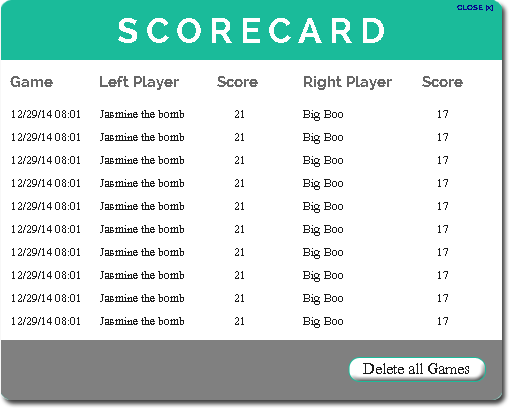
<style>
.page{position:relative;width:509px;height:408px;background:#ffffff}
.page>*{position:absolute;margin:0}
.t1{font:8px "Raleway-Bold";color:#07048e}
.t2{font:35px "Raleway-Bold";letter-spacing:0.2em;color:#ffffff}
.t3{font:15px "Raleway-Bold";color:#676767}
.t4{font:14px "ShonarBangla";color:#1a1a1a}
.t5{font:19px "ShonarBangla";color:#1a1a1a}
</style>
<div class="page">
<p class="t1" style="left:457px;top:5px;width:36px;height:6px">CLOSE [x]</p>
<p class="t2" style="left:118px;top:18px;width:266px;height:25px">SCORECARD</p>
<p class="t3" style="left:10px;top:76px;width:43px;height:11px">Game</p>
<p class="t3" style="left:100px;top:76px;width:79px;height:14px">Left Player</p>
<p class="t3" style="left:217px;top:76px;width:41px;height:11px">Score</p>
<p class="t3" style="left:304px;top:76px;width:88px;height:14px">Right Player</p>
<p class="t3" style="left:422px;top:76px;width:41px;height:11px">Score</p>
<p class="t4" style="left:12px;top:110px;width:68px;height:8px">12/29/14 08:01</p>
<p class="t4" style="left:100px;top:110px;width:84px;height:8px">Jasmine the bomb</p>
<p class="t4" style="left:235px;top:110px;width:9px;height:8px">21</p>
<p class="t4" style="left:303px;top:110px;width:40px;height:11px">Big Boo</p>
<p class="t4" style="left:438px;top:110px;width:10px;height:8px">17</p>
<p class="t4" style="left:12px;top:133px;width:68px;height:8px">12/29/14 08:01</p>
<p class="t4" style="left:100px;top:133px;width:84px;height:8px">Jasmine the bomb</p>
<p class="t4" style="left:235px;top:133px;width:9px;height:8px">21</p>
<p class="t4" style="left:303px;top:133px;width:40px;height:11px">Big Boo</p>
<p class="t4" style="left:438px;top:133px;width:10px;height:8px">17</p>
<p class="t4" style="left:12px;top:156px;width:68px;height:8px">12/29/14 08:01</p>
<p class="t4" style="left:100px;top:156px;width:84px;height:8px">Jasmine the bomb</p>
<p class="t4" style="left:235px;top:156px;width:9px;height:8px">21</p>
<p class="t4" style="left:303px;top:156px;width:40px;height:11px">Big Boo</p>
<p class="t4" style="left:438px;top:156px;width:10px;height:8px">17</p>
<p class="t4" style="left:12px;top:179px;width:68px;height:8px">12/29/14 08:01</p>
<p class="t4" style="left:100px;top:179px;width:84px;height:8px">Jasmine the bomb</p>
<p class="t4" style="left:235px;top:179px;width:9px;height:8px">21</p>
<p class="t4" style="left:303px;top:179px;width:40px;height:11px">Big Boo</p>
<p class="t4" style="left:438px;top:179px;width:10px;height:8px">17</p>
<p class="t4" style="left:12px;top:202px;width:68px;height:8px">12/29/14 08:01</p>
<p class="t4" style="left:100px;top:202px;width:84px;height:8px">Jasmine the bomb</p>
<p class="t4" style="left:235px;top:202px;width:9px;height:8px">21</p>
<p class="t4" style="left:303px;top:202px;width:40px;height:11px">Big Boo</p>
<p class="t4" style="left:438px;top:202px;width:10px;height:8px">17</p>
<p class="t4" style="left:12px;top:225px;width:68px;height:8px">12/29/14 08:01</p>
<p class="t4" style="left:100px;top:225px;width:84px;height:8px">Jasmine the bomb</p>
<p class="t4" style="left:235px;top:225px;width:9px;height:8px">21</p>
<p class="t4" style="left:303px;top:225px;width:40px;height:11px">Big Boo</p>
<p class="t4" style="left:438px;top:225px;width:10px;height:8px">17</p>
<p class="t4" style="left:12px;top:248px;width:68px;height:8px">12/29/14 08:01</p>
<p class="t4" style="left:100px;top:248px;width:84px;height:8px">Jasmine the bomb</p>
<p class="t4" style="left:235px;top:248px;width:9px;height:8px">21</p>
<p class="t4" style="left:303px;top:248px;width:40px;height:11px">Big Boo</p>
<p class="t4" style="left:438px;top:248px;width:10px;height:8px">17</p>
<p class="t4" style="left:12px;top:271px;width:68px;height:8px">12/29/14 08:01</p>
<p class="t4" style="left:100px;top:271px;width:84px;height:8px">Jasmine the bomb</p>
<p class="t4" style="left:235px;top:271px;width:9px;height:8px">21</p>
<p class="t4" style="left:303px;top:271px;width:40px;height:11px">Big Boo</p>
<p class="t4" style="left:438px;top:271px;width:10px;height:8px">17</p>
<p class="t4" style="left:12px;top:294px;width:68px;height:8px">12/29/14 08:01</p>
<p class="t4" style="left:100px;top:294px;width:84px;height:8px">Jasmine the bomb</p>
<p class="t4" style="left:235px;top:294px;width:9px;height:8px">21</p>
<p class="t4" style="left:303px;top:294px;width:40px;height:11px">Big Boo</p>
<p class="t4" style="left:438px;top:294px;width:10px;height:8px">17</p>
<p class="t4" style="left:12px;top:317px;width:68px;height:8px">12/29/14 08:01</p>
<p class="t4" style="left:100px;top:317px;width:84px;height:8px">Jasmine the bomb</p>
<p class="t4" style="left:235px;top:317px;width:9px;height:8px">21</p>
<p class="t4" style="left:303px;top:317px;width:40px;height:11px">Big Boo</p>
<p class="t4" style="left:438px;top:317px;width:10px;height:8px">17</p>
<p class="t5" style="left:363px;top:363px;width:106px;height:11px">Delete all Games</p>
</div>
